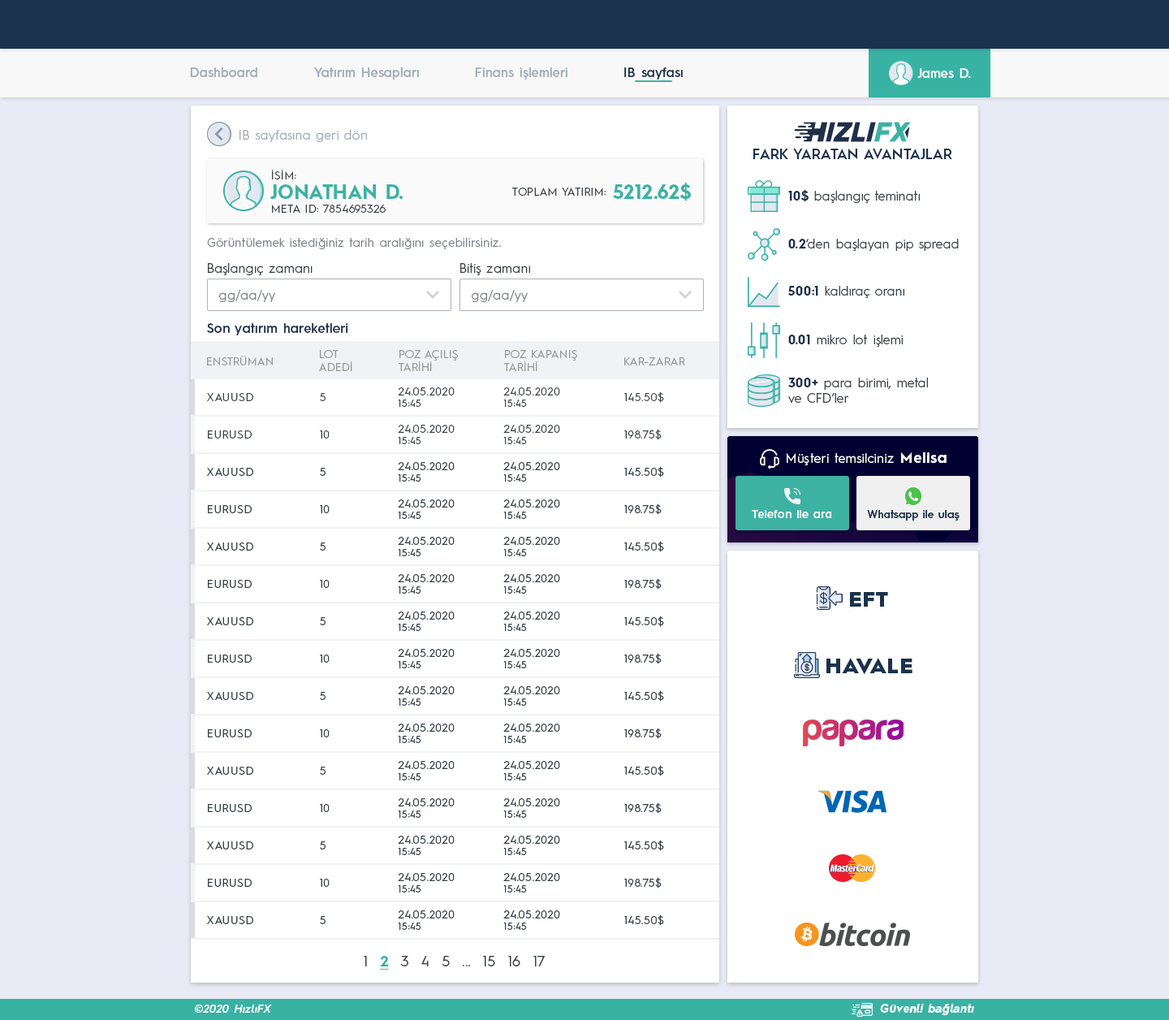
<style>
.page{position:relative;width:1169px;height:1020px;background:#ffffff}
.page>*{position:absolute;margin:0}
.t1{font:13px "HurmeGeometricSans3-SemiBold";color:#a1adbb}
.t2{font:13px "HurmeGeometricSans3-SemiBold";color:#1a324c}
.t3{font:13px "HurmeGeometricSans3-SemiBold";color:#fefefe}
.t4{font:13px "HurmeGeometricSans1-Regular";letter-spacing:0.01em;color:#a1adbb}
.t5{font:14.6px "HurmeGeometricSans1-SemiBold";color:#1a324c}
.t6{font:11.4px "HurmeGeometricSans1-Regular";letter-spacing:0.01em;color:#3a4149}
.t7{font:19.5px "HurmeGeometricSans1-Bold";letter-spacing:0.01em;color:#3db2a3}
.t8{font:13px "HurmeGeometricSans1-Regular";color:#3a4149}
.t9{font:13px "HurmeGeometricSans1-Bold";color:#1a324c}
.t10{font:12.2px "HurmeGeometricSans1-Regular";letter-spacing:0.025em;color:#7f8389}
.t11{font:13px "HurmeGeometricSans1-Regular";letter-spacing:0.01em;color:#3a4149}
.t12{font:13px "HurmeGeometricSans1-Regular";letter-spacing:0.01em;color:#7f8389}
.t13{font:13px "HurmeGeometricSans3-SemiBold";letter-spacing:0.01em;color:#1a324c}
.t14{font:11.4px "HurmeGeometricSans1-Regular";color:#999999}
.t15{font:11.4px/11.4px "HurmeGeometricSans1-Regular";letter-spacing:0.025em;color:#3a4149}
.t16{font:9.7px/11.4px "HurmeGeometricSans1-Regular";letter-spacing:0.025em;color:#3a4149}
.t17{font:11.4px "HurmeGeometricSans1-Regular";letter-spacing:0.025em;color:#3a4149}
.t18{font:13px "HurmeGeometricSans1-Regular";letter-spacing:0.025em;color:#ffffff}
.t19{font:14.6px "HurmeGeometricSans1-Bold";letter-spacing:0.05em;color:#ffffff}
.t20{font:11.4px "HurmeGeometricSans3-SemiBold";letter-spacing:0.01em;color:#ffffff}
.t21{font:11px "HurmeGeometricSans3-SemiBold";letter-spacing:0.01em;color:#1a324c}
.t22{font:21.5px "HurmeGeometricSans1-Black";letter-spacing:0.025em;color:#1a324c}
.t23{font:14.6px "HurmeGeometricSans1-Regular";letter-spacing:0.025em;color:#3a4149}
.t24{font:14.6px "HurmeGeometricSans1-Bold";letter-spacing:0.025em;color:#38b2a3;text-decoration:underline}
.t25{font:11.4px "HurmeGeometricSans2-SemiBoldObl";letter-spacing:0.025em;color:#ffffff}
.t26{font:11.4px "HurmeGeometricSans2-BoldObl";letter-spacing:0.025em;color:#ffffff}
</style>
<div class="page">
<p class="t1" style="left:190px;top:67px;width:67px;height:10px">Dashboard</p>
<p class="t1" style="left:314px;top:67px;width:105px;height:13px">Yatırım Hesapları</p>
<p class="t1" style="left:475px;top:67px;width:93px;height:13px">Finans işlemleri</p>
<p class="t2" style="left:624px;top:67px;width:59px;height:13px">IB sayfası</p>
<p class="t3" style="left:918px;top:68px;width:53px;height:10px">James D.</p>
<p class="t4" style="left:240px;top:130px;width:127px;height:12px">IB sayfasına geri dön</p>
<p class="t5" style="left:754px;top:149px;width:198px;height:10px">FARK YARATAN AVANTAJLAR</p>
<p class="t6" style="left:271px;top:170px;width:25px;height:9px">İSİM:</p>
<p class="t7" style="left:270px;top:184px;width:133px;height:16px">JONATHAN D.</p>
<p class="t7" style="left:613px;top:182px;width:78px;height:19px">5212.62$</p>
<p class="t6" style="left:512px;top:188px;width:94px;height:8px">TOPLAM YATIRIM:</p>
<p class="t8" style="left:788px;top:189px;width:132px;height:14px"><span class="t9">10$</span> başlangıç teminatı</p>
<p class="t6" style="left:272px;top:205px;width:114px;height:8px">META ID: 7854695326</p>
<p class="t10" style="left:207px;top:238px;width:294px;height:11px">Görüntülemek istediğiniz tarih aralığını seçebilirsiniz.</p>
<p class="t8" style="left:788px;top:239px;width:171px;height:12px"><span class="t9">0.2</span>‘den başlayan pip spread</p>
<p class="t11" style="left:208px;top:263px;width:105px;height:12px">Başlangıç zamanı</p>
<p class="t11" style="left:460px;top:263px;width:70px;height:12px">Bitiş zamanı</p>
<p class="t12" style="left:219px;top:290px;width:56px;height:12px">gg/aa/yy</p>
<p class="t12" style="left:472px;top:290px;width:56px;height:12px">gg/aa/yy</p>
<p class="t8" style="left:788px;top:286px;width:117px;height:12px"><span class="t9">500:1</span> kaldıraç oranı</p>
<p class="t13" style="left:207px;top:323px;width:141px;height:12px">Son yatırım hareketleri</p>
<p class="t8" style="left:788px;top:335px;width:115px;height:12px"><span class="t9">0.01</span> mikro lot işlemi</p>
<p class="t14" style="left:319px;top:350px;width:33px;height:21px">LOT<br>ADEDİ</p>
<p class="t14" style="left:399px;top:350px;width:59px;height:21px">POZ AÇILIŞ<br>TARİHİ</p>
<p class="t14" style="left:504px;top:350px;width:73px;height:21px">POZ KAPANIŞ<br>TARİHİ</p>
<p class="t14" style="left:207px;top:356px;width:66px;height:9px">ENSTRÜMAN</p>
<p class="t14" style="left:624px;top:357px;width:61px;height:8px">KAR-ZARAR</p>
<p class="t8" style="left:788px;top:378px;width:140px;height:26px"><span class="t9">300+</span> para birimi, metal<br>ve CFD’ler</p>
<p class="t15" style="left:398px;top:387px;width:57px;height:20px">24.05.2020<br><span class="t16">15:45</span></p>
<p class="t15" style="left:503px;top:387px;width:57px;height:20px">24.05.2020<br><span class="t16">15:45</span></p>
<p class="t17" style="left:207px;top:393px;width:46px;height:8px">XAUUSD</p>
<p class="t17" style="left:320px;top:393px;width:6px;height:8px">5</p>
<p class="t17" style="left:624px;top:391px;width:40px;height:12px">145.50$</p>
<p class="t15" style="left:398px;top:425px;width:57px;height:19px">24.05.2020<br><span class="t16">15:45</span></p>
<p class="t15" style="left:503px;top:425px;width:57px;height:19px">24.05.2020<br><span class="t16">15:45</span></p>
<p class="t17" style="left:208px;top:430px;width:44px;height:8px">EURUSD</p>
<p class="t17" style="left:320px;top:430px;width:10px;height:8px">10</p>
<p class="t17" style="left:624px;top:429px;width:38px;height:11px">198.75$</p>
<p class="t18" style="left:787px;top:452px;width:160px;height:13px">Müşteri temsilciniz <span class="t19">Melisa</span></p>
<p class="t20" style="left:752px;top:510px;width:79px;height:8px">Telefon ile ara</p>
<p class="t21" style="left:867px;top:510px;width:93px;height:10px">Whatsapp ile ulaş</p>
<p class="t22" style="left:850px;top:592px;width:38px;height:15px">EFT</p>
<p class="t22" style="left:827px;top:658px;width:86px;height:17px">HAVALE</p>
<p class="t23" style="left:364px;top:956px;width:182px;height:13px">1  <span class="t24">2</span>  3  4  5  ...  15  16  17</p>
<p class="t25" style="left:195px;top:1004px;width:77px;height:9px">©2020 HızlıFX</p>
<p class="t26" style="left:880px;top:1004px;width:94px;height:12px">Güvenli bağlantı</p>
</div>
